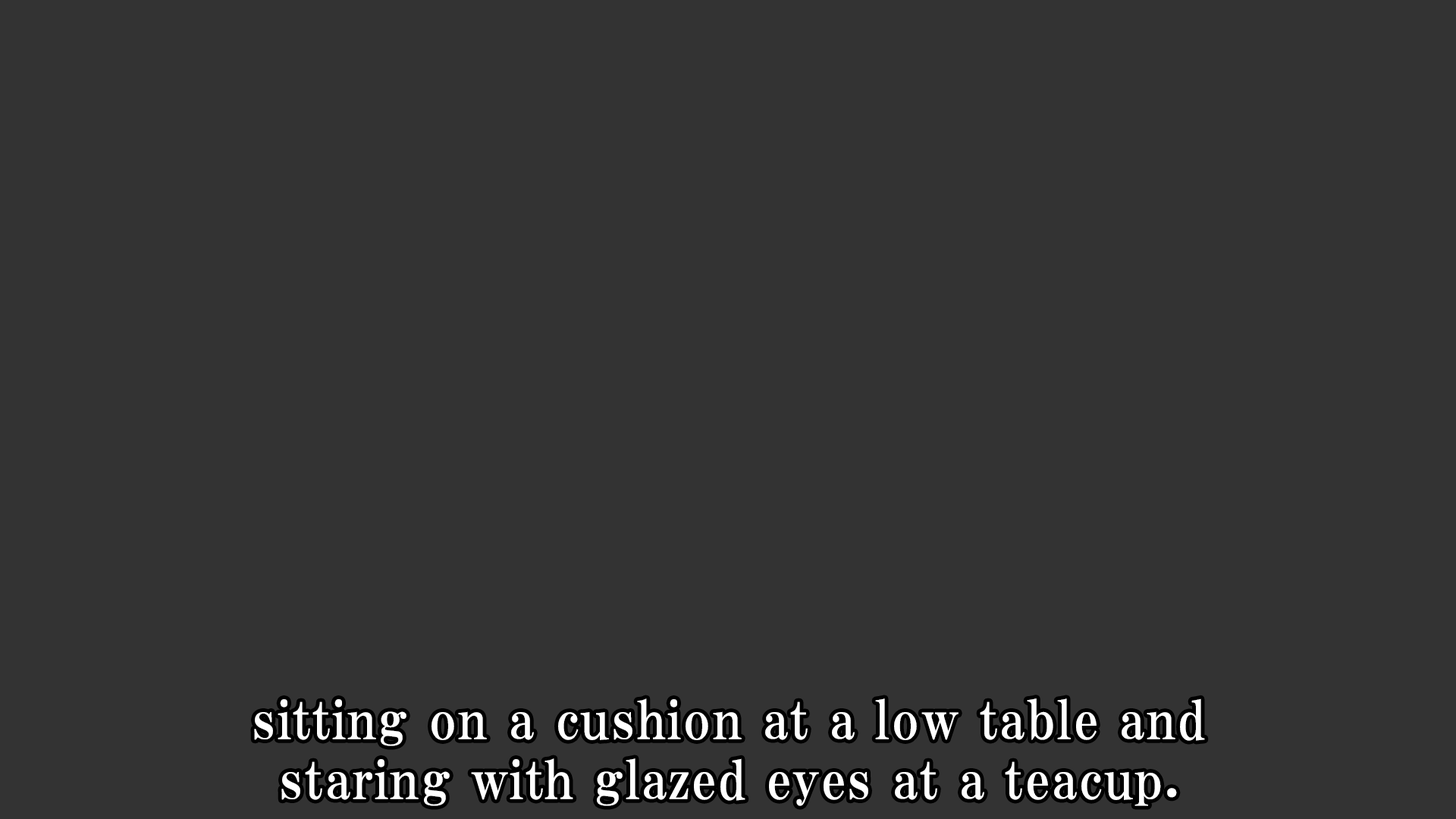
<style>
.page{position:relative;width:1456px;height:819px;background:#333333}
.page>*{position:absolute;margin:0}
.t1{font:53.1px/59.9px "HGPMinchoE";letter-spacing:0.025em;color:#ffffff}
</style>
<div class="page">
<p class="t1" style="left:254px;top:698px;width:951px;height:108px;text-align:center">sitting on a cushion at a low table and<br>staring with glazed eyes at a teacup.</p>
</div>
